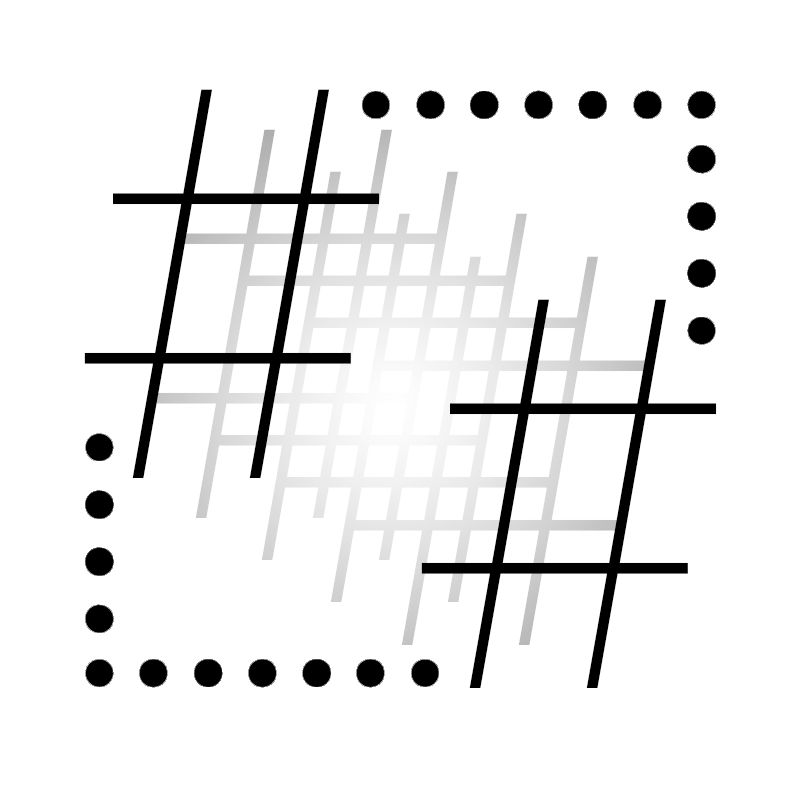
<style>
.page{position:relative;width:800px;height:800px;background:#ffffff}
.page>*{position:absolute;margin:0}
.t1{font:531.7px "mplus-2p-thin";color:#000000;text-transform:uppercase}
</style>
<div class="page">
<p class="t1" style="left:84px;top:89px;width:296px;height:389px">#</p>
<p class="t1" style="left:421px;top:299px;width:296px;height:389px">#</p>
</div>
